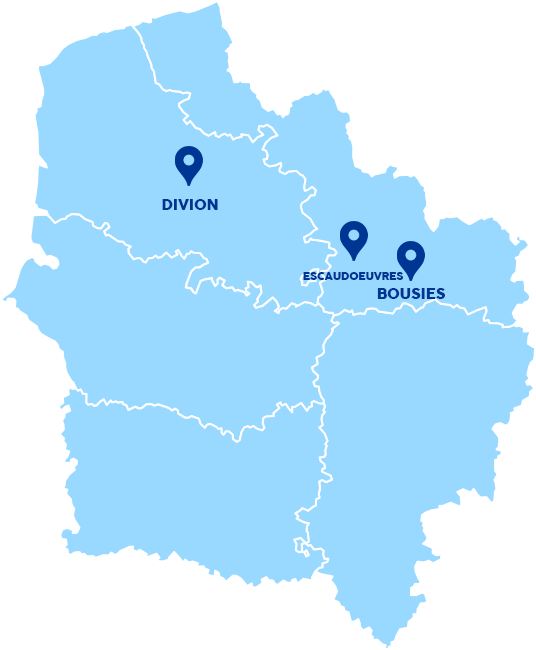
<style>
.page{position:relative;width:536px;height:650px;background:#99d9ff}
.page>*{position:absolute;margin:0}
.t1{font:14.7px "Cocogoose";color:#003693}
.t2{font:10.7px "Cocogoose";color:#003693}
</style>
<div class="page">
<p class="t1" style="left:162px;top:199px;width:56px;height:11px">DIVION</p>
<p class="t2" style="left:303px;top:272px;width:101px;height:8px">ESCAUDOEUVRES</p>
<p class="t1" style="left:377px;top:288px;width:68px;height:11px">BOUSIES</p>
</div>
